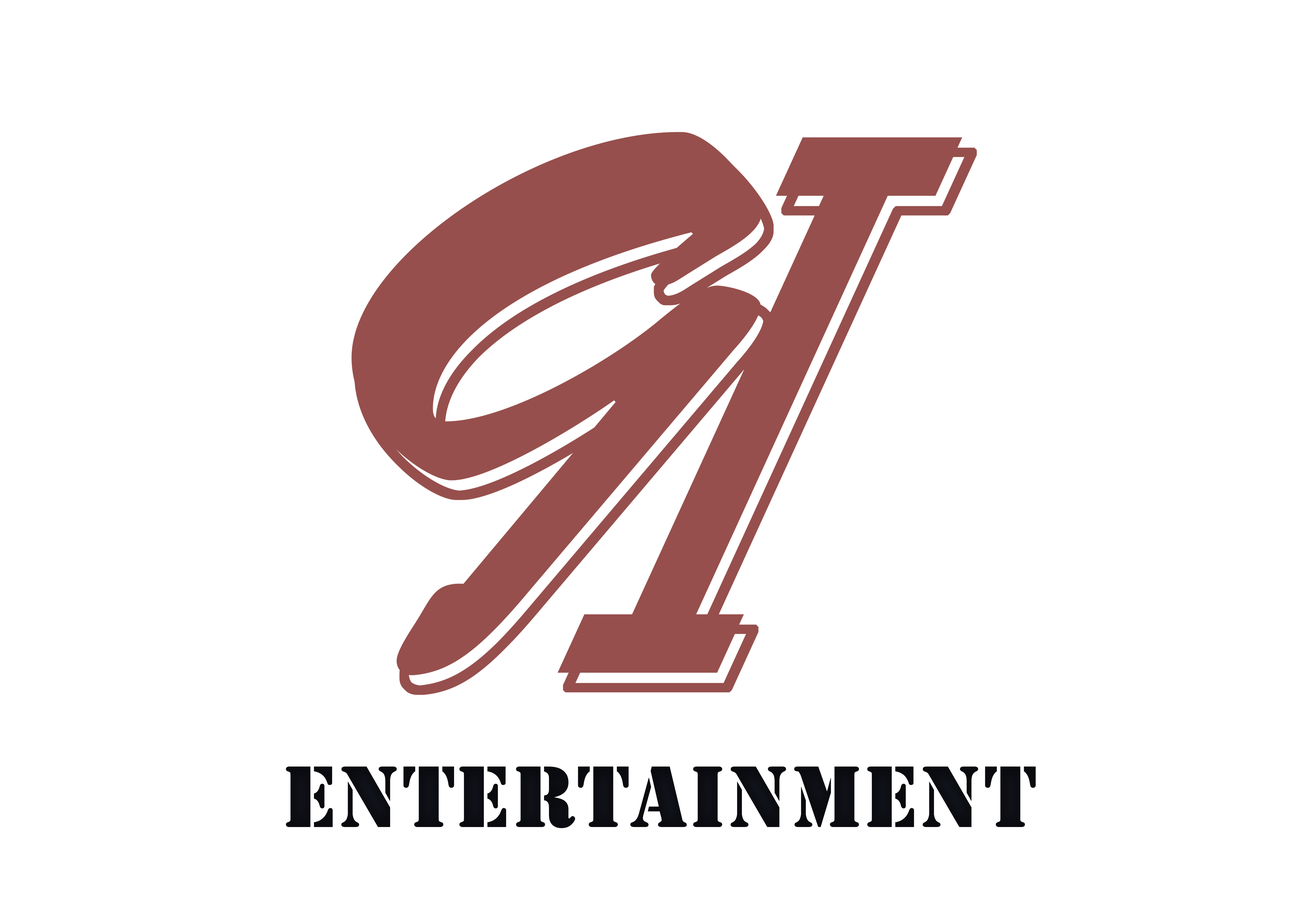
<style>
.page{position:relative;width:1300px;height:917px;background:#ffffff}
.page>*{position:absolute;margin:0}
.t1{font:80.9px "StencilStd";color:#0b0c11;font-weight:bold}
</style>
<div class="page">
<p class="t1" style="left:286px;top:767px;width:750px;height:62px">ENTERTAINMENT</p>
</div>
